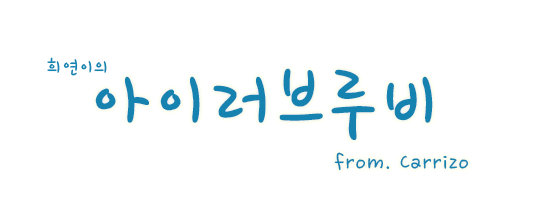
<style>
.page{position:relative;width:543px;height:211px;background:#ffffff}
.page>*{position:absolute;margin:0}
.t1{font:24px "HoonWcatR";letter-spacing:0.05em;color:#1682af}
.t2{font:95.3px "HoonWcatR";letter-spacing:0.05em;color:#1682af}
</style>
<div class="page">
<p class="t1" style="left:47px;top:57px;width:60px;height:19px">희연이의</p>
<p class="t1" style="left:95px;top:68px;width:374px;height:102px"><span class="t2">아이러브루비<br>                     </span>     from. Carrizo</p>
</div>
